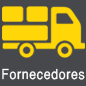
<style>
.page{position:relative;width:86px;height:86px;background:#47484b}
.page>*{position:absolute;margin:0}
.t1{font:13.7px "Helvetica-Normal";letter-spacing:0.06em;color:#ffffff;scale:0.89 1}
</style>
<div class="page">
<p class="t1" style="left:2px;top:68px;width:83px;height:12px">Fornecedores</p>
</div>
